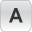
<style>
.page{position:relative;width:32px;height:32px}
.page>*{position:absolute;margin:0}
.t1{font:20px "Arial-BoldMT";color:#343434}
</style>
<div class="page">
<p class="t1" style="left:9px;top:8px;width:14px;height:15px">A</p>
</div>
